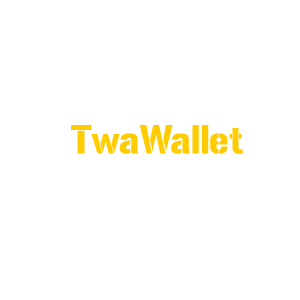
<style>
.page{position:relative;width:300px;height:300px;background:#ffffff}
.page>*{position:absolute;margin:0}
.t1{font:40px "Gunplay";color:#ffcc00}
</style>
<div class="page">
<p class="t1" style="left:71px;top:125px;width:172px;height:29px">TwaWallet</p>
</div>
